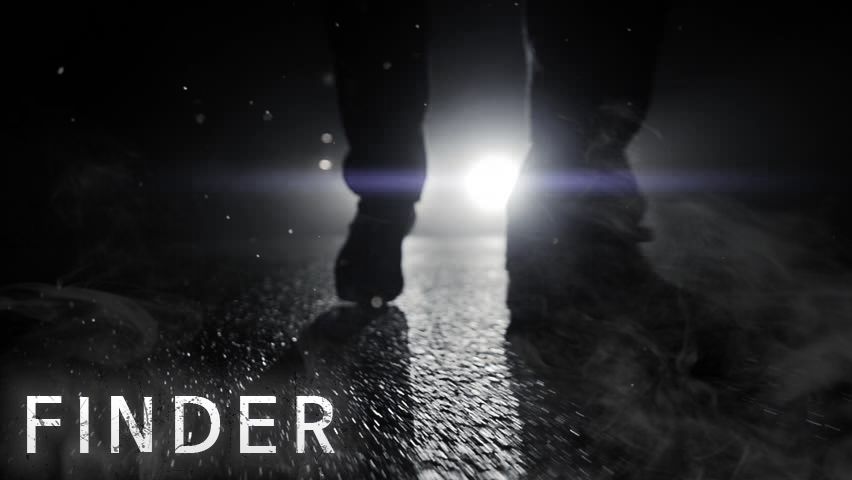
<style>
.page{position:relative;width:852px;height:480px}
.page>*{position:absolute;margin:0}
.t1{font:72px "NanumBarunGothic";letter-spacing:0.155em;color:#ffffff;font-weight:bold}
</style>
<div class="page">
<p class="t1" style="left:27px;top:396px;width:308px;height:57px">FINDER</p>
</div>
